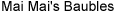
<style>
.page{position:relative;width:116px;height:13px;background:#ffffff}
.page>*{position:absolute;margin:0}
.t1{font:14px "ArialMT";color:#000000}
</style>
<div class="page">
<p class="t1" style="left:2px;top:1px;width:112px;height:10px">Mai Mai's Baubles</p>
</div>
